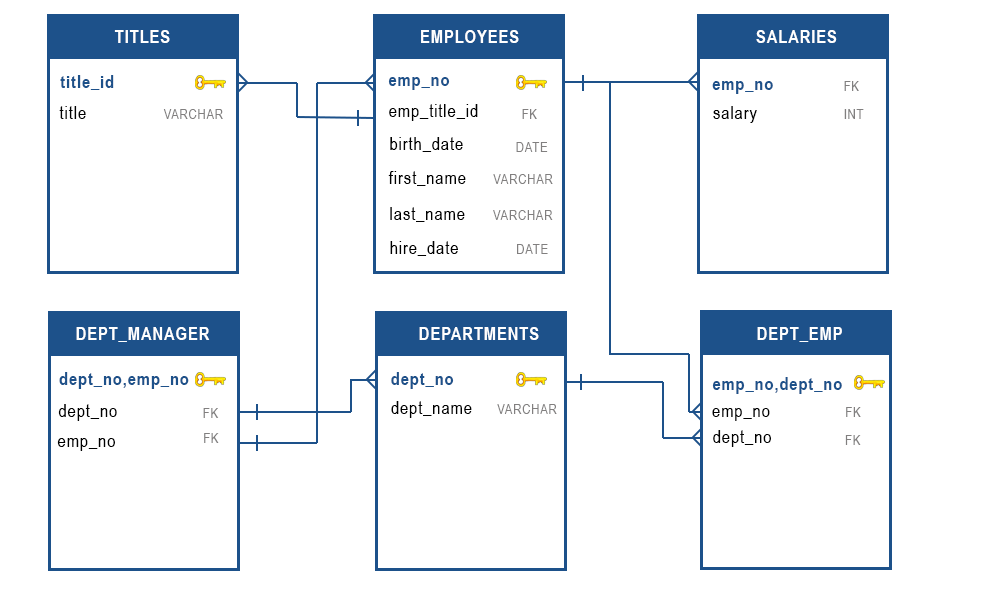
<style>
.page{position:relative;width:1000px;height:600px;background:#ffffff}
.page>*{position:absolute;margin:0}
.t1{font:18px "ArialNarrow-Bold";letter-spacing:0.05em;color:#ffffff}
.t2{font:18px "ArialNarrow-Bold";letter-spacing:0.05em;color:#1d518a}
.t3{font:14px "ArialNarrow";letter-spacing:0.05em;color:#817f7f}
.t4{font:18px "ArialNarrow";letter-spacing:0.05em;color:#000000}
</style>
<div class="page">
<p class="t1" style="left:114px;top:30px;width:56px;height:13px">TITLES</p>
<p class="t1" style="left:421px;top:30px;width:98px;height:13px">EMPLOYEES</p>
<p class="t1" style="left:756px;top:30px;width:81px;height:13px">SALARIES</p>
<p class="t2" style="left:60px;top:75px;width:54px;height:15px">title_id</p>
<p class="t2" style="left:388px;top:77px;width:62px;height:13px">emp_no</p>
<p class="t2" style="left:712px;top:81px;width:61px;height:13px">emp_no</p>
<p class="t3" style="left:844px;top:81px;width:15px;height:10px">FK</p>
<p class="t4" style="left:59px;top:106px;width:27px;height:13px">title</p>
<p class="t3" style="left:163px;top:109px;width:60px;height:10px">VARCHAR</p>
<p class="t4" style="left:389px;top:104px;width:89px;height:17px">emp_title_id</p>
<p class="t3" style="left:522px;top:109px;width:15px;height:10px">FK</p>
<p class="t4" style="left:713px;top:106px;width:44px;height:17px">salary</p>
<p class="t3" style="left:844px;top:109px;width:20px;height:10px">INT</p>
<p class="t4" style="left:390px;top:137px;width:73px;height:15px">birth_date</p>
<p class="t3" style="left:516px;top:142px;width:32px;height:10px">DATE</p>
<p class="t4" style="left:388px;top:171px;width:78px;height:15px">first_name</p>
<p class="t3" style="left:493px;top:174px;width:60px;height:10px">VARCHAR</p>
<p class="t4" style="left:390px;top:207px;width:75px;height:15px">last_name</p>
<p class="t3" style="left:493px;top:210px;width:60px;height:10px">VARCHAR</p>
<p class="t4" style="left:390px;top:241px;width:68px;height:15px">hire_date</p>
<p class="t3" style="left:517px;top:244px;width:31px;height:10px">DATE</p>
<p class="t1" style="left:76px;top:327px;width:134px;height:15px">DEPT_MANAGER</p>
<p class="t1" style="left:419px;top:327px;width:120px;height:13px">DEPARTMENTS</p>
<p class="t1" style="left:757px;top:327px;width:85px;height:15px">DEPT_EMP</p>
<p class="t2" style="left:59px;top:372px;width:130px;height:17px">dept_no,emp_no</p>
<p class="t2" style="left:391px;top:372px;width:63px;height:17px">dept_no</p>
<p class="t2" style="left:712px;top:377px;width:130px;height:17px">emp_no,dept_no</p>
<p class="t4" style="left:391px;top:401px;width:81px;height:17px">dept_name</p>
<p class="t4" style="left:58px;top:404px;width:59px;height:17px">dept_no</p>
<p class="t3" style="left:203px;top:408px;width:16px;height:10px">FK</p>
<p class="t3" style="left:497px;top:404px;width:60px;height:10px">VARCHAR</p>
<p class="t4" style="left:712px;top:408px;width:58px;height:13px">emp_no</p>
<p class="t3" style="left:846px;top:407px;width:15px;height:10px">FK</p>
<p class="t4" style="left:57px;top:438px;width:58px;height:13px">emp_no</p>
<p class="t3" style="left:204px;top:433px;width:15px;height:10px">FK</p>
<p class="t4" style="left:713px;top:430px;width:58px;height:17px">dept_no</p>
<p class="t3" style="left:845px;top:435px;width:16px;height:10px">FK</p>
</div>
